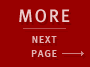
<style>
.page{position:relative;width:90px;height:67px;background:#990000}
.page>*{position:absolute;margin:0}
.t1{font:18px "MetaMediumRoman";letter-spacing:0.1em;color:#ebcccc}
.t2{font:10px/14px "MetaMediumRoman";letter-spacing:0.1em;color:#e1b3b3}
</style>
<div class="page">
<p class="t1" style="left:19px;top:9px;width:51px;height:14px">MORE</p>
<p class="t2" style="left:31px;top:36px;width:26px;height:21px;text-align:center">NEXT<br>PAGE</p>
</div>
